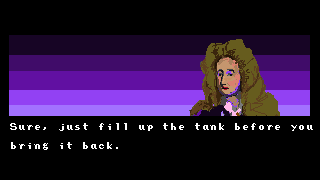
<style>
.page{position:relative;width:320px;height:180px;background:#000000}
.page>*{position:absolute;margin:0}
.t1{font:8px "PressStartReg";color:#ffffff}
</style>
<div class="page">
<p class="t1" style="left:10px;top:123px;width:303px;height:27px">Sure, just fill up the tank before you <br><br>bring it back.</p>
</div>
